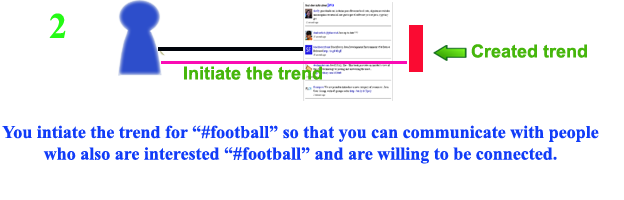
<style>
.page{position:relative;width:624px;height:200px;background:#ffffff}
.page>*{position:absolute;margin:0}
.t1{font:18px "Arial-BoldMT";color:#46b60c}
.t2{font:18px "TimesNewRomanPS-BoldMT";color:#113cf8}
</style>
<div class="page">
<p class="t1" style="left:471px;top:44px;width:116px;height:14px">Created trend</p>
<p class="t1" style="left:184px;top:66px;width:138px;height:14px">Initiate the trend</p>
<p class="t2" style="left:2px;top:125px;width:597px;height:39px;text-align:center">You intiate the trend for “#football” so that you can communicate with people who also are interested “#football” and are willing to be connected.</p>
</div>
